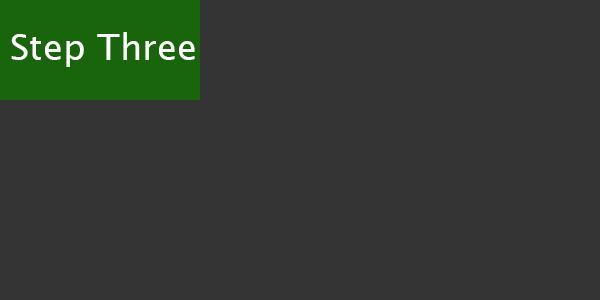
<style>
.page{position:relative;width:600px;height:300px;background:#333333}
.page>*{position:absolute;margin:0}
.t1{font:36px "LucidaSansUnicode";color:#ffffff}
</style>
<div class="page">
<p class="t1" style="left:11px;top:32px;width:184px;height:35px">Step Three</p>
</div>
